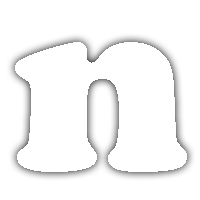
<style>
.page{position:relative;width:200px;height:200px;background:#ffffff}
.page>*{position:absolute;margin:0}
.t1{font:261.9px "CooperBlack";color:#ffffff}
</style>
<div class="page">
<p class="t1" style="left:15px;top:42px;width:172px;height:130px">n</p>
</div>
